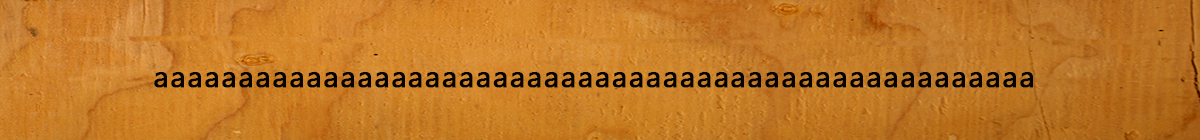
<style>
.page{position:relative;width:1200px;height:140px}
.page>*{position:absolute;margin:0}
.t1{font:30px "MicrosoftNewTaiLue";letter-spacing:0.03em;color:#050300;font-weight:bold}
</style>
<div class="page">
<p class="t1" style="left:154px;top:72px;width:879px;height:16px">aaaaaaaaaaaaaaaaaaaaaaaaaaaaaaaaaaaaaaaaaaaaaaaaaaaa</p>
</div>
